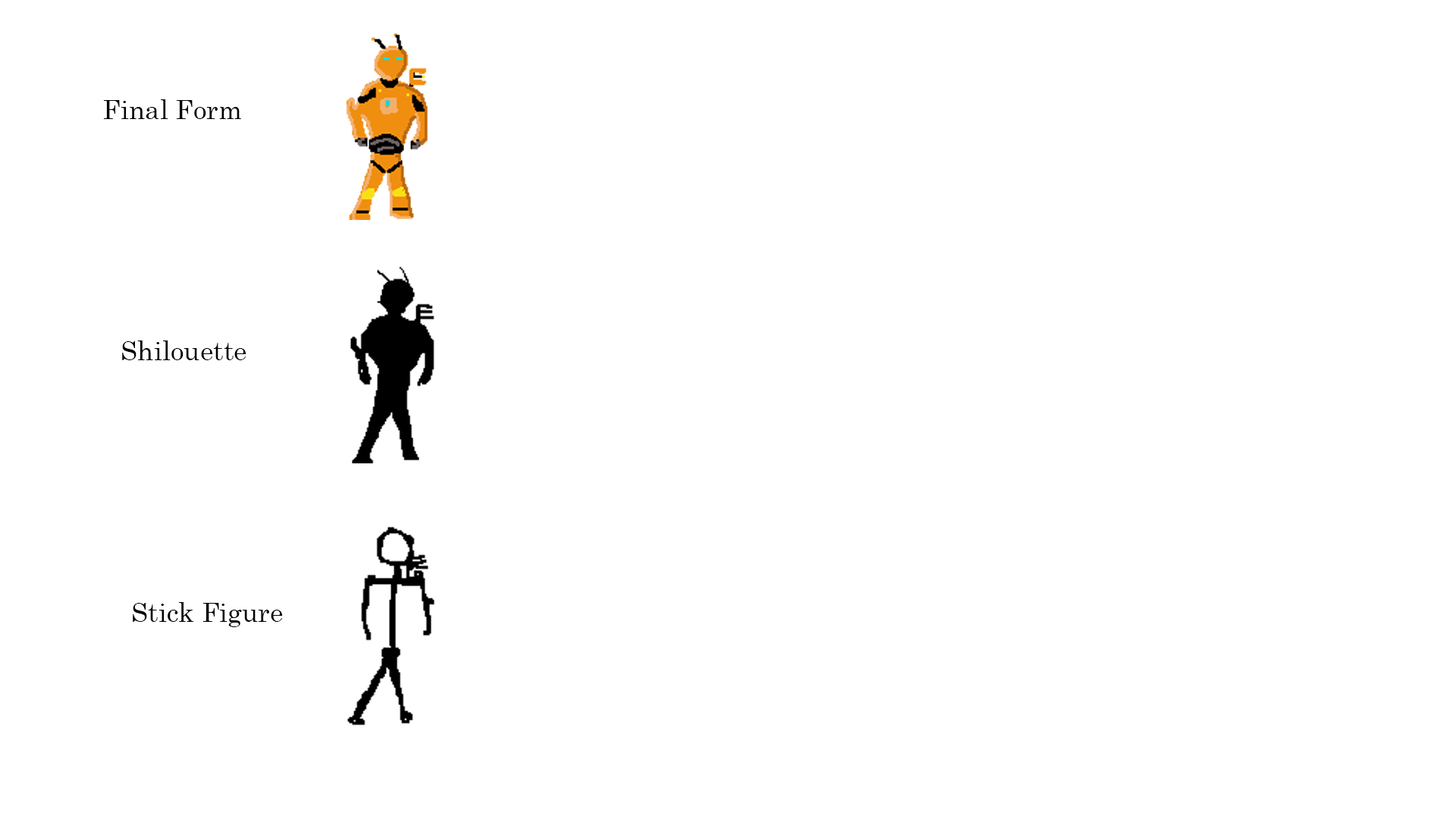
<style>
.page{position:relative;width:1456px;height:819px;background:#ffffff}
.page>*{position:absolute;margin:0}
.t1{font:26.5px "Century";color:#000000}
</style>
<div class="page">
<p class="t1" style="left:103px;top:99px;width:138px;height:20px">Final Form</p>
<p class="t1" style="left:122px;top:340px;width:124px;height:20px">Shilouette</p>
<p class="t1" style="left:133px;top:602px;width:150px;height:25px">Stick Figure</p>
</div>
